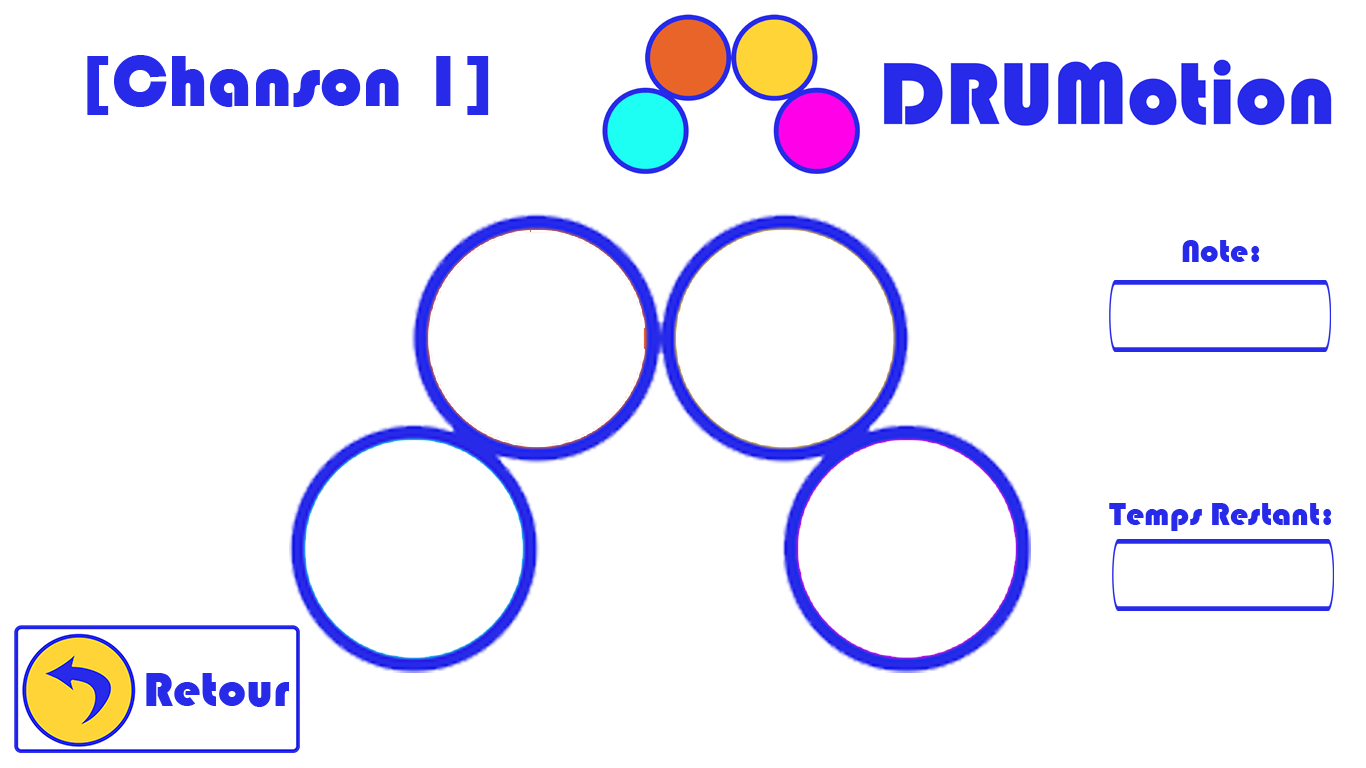
<style>
.page{position:relative;width:1366px;height:768px;background:#ffffff}
.page>*{position:absolute;margin:0}
.t1{font:75px "Bauhaus93";color:#272ae8}
.t2{font:33.3px "Bauhaus93";color:#272ae8}
.t3{font:50px "Bauhaus93";color:#272ae8}
</style>
<div class="page">
<p class="t1" style="left:87px;top:55px;width:402px;height:60px">[Chanson 1]</p>
<p class="t2" style="left:1182px;top:240px;width:78px;height:22px">Note:</p>
<p class="t2" style="left:1109px;top:503px;width:223px;height:28px">Temps Restant:</p>
<p class="t3" style="left:146px;top:673px;width:143px;height:34px">Retour</p>
</div>
